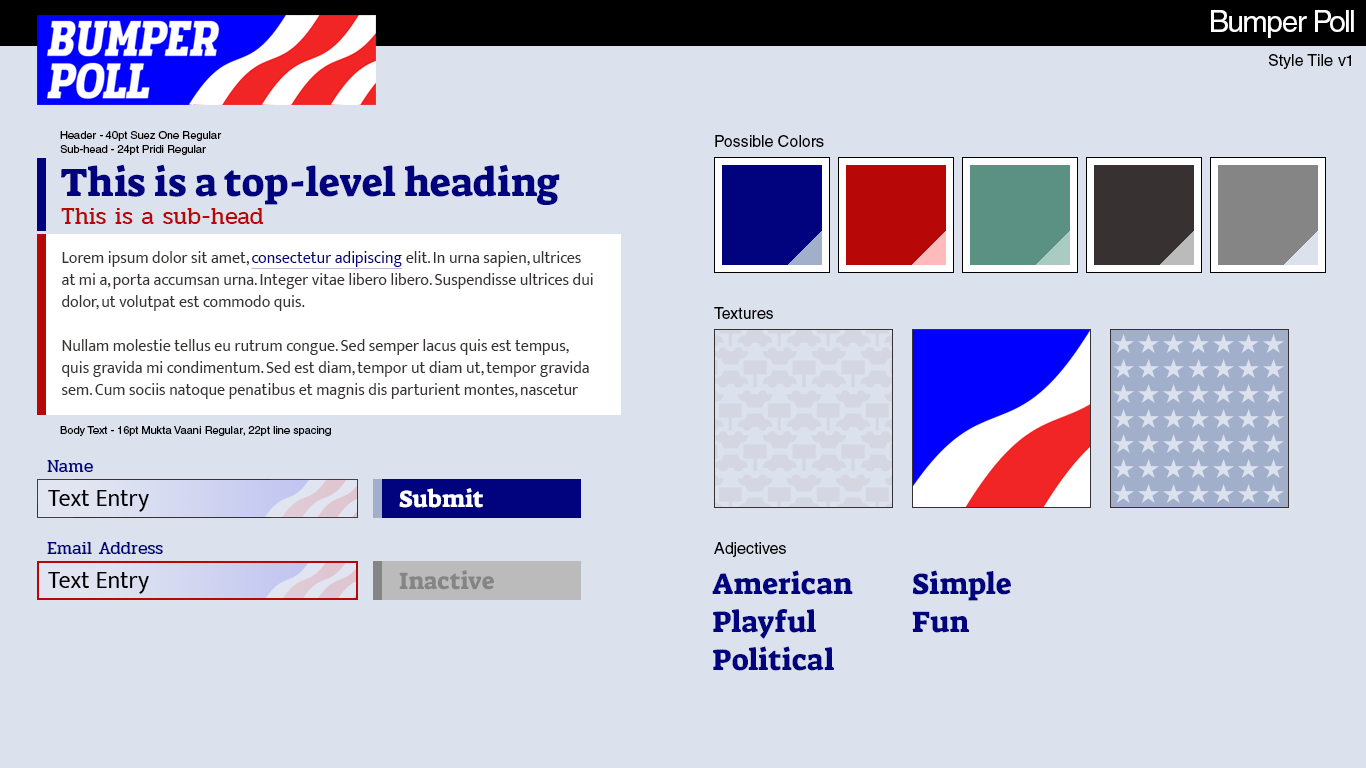
<style>
.page{position:relative;width:1366px;height:768px;background:#dce1ee}
.page>*{position:absolute;margin:0}
.t1{font:30px "HelveticaLT";letter-spacing:-0.05em;color:#ffffff}
.t2{font:16px "HelveticaLT";color:#000000}
.t3{font:11px "HelveticaLT";color:#000000}
.t4{font:40px "SuezOne-Regular";color:#00037d}
.t5{font:24px "Pridi-Regular";color:#b70707}
.t6{font:16px/22px "MuktaVaani-Regular";color:#383131}
.t7{font:16px/22px "MuktaVaani-Regular";color:#00037d;text-decoration:underline}
.t8{font:18px "Pridi-Regular";color:#00037d}
.t9{font:24px "MuktaVaani-Regular";color:#000000}
.t10{font:24px "SuezOne-Regular";color:#ffffff}
.t11{font:24px "SuezOne-Regular";color:#858585}
.t12{font:30px "SuezOne-Regular";color:#00037d}
</style>
<div class="page">
<p class="t1" style="left:1211px;top:10px;width:143px;height:28px">Bumper Poll</p>
<p class="t2" style="left:1269px;top:54px;width:82px;height:15px">Style Tile v1</p>
<p class="t3" style="left:60px;top:131px;width:162px;height:10px">Header - 40pt Suez One Regular</p>
<p class="t2" style="left:715px;top:135px;width:109px;height:12px">Possible Colors</p>
<p class="t3" style="left:60px;top:145px;width:146px;height:10px">Sub-head - 24pt Pridi Regular</p>
<p class="t4" style="left:61px;top:164px;width:499px;height:41px">This is a top-level heading</p>
<p class="t5" style="left:61px;top:208px;width:202px;height:16px">This is a sub-head</p>
<p class="t6" style="left:62px;top:251px;width:531px;height:148px">Lorem ipsum dolor sit amet, <span class="t7">consectetur adipiscing</span> elit. In urna sapien, ultrices at mi a, porta accumsan urna. Integer vitae libero libero. Suspendisse ultrices dui dolor, ut volutpat est commodo quis.<br><br>Nullam molestie tellus eu rutrum congue. Sed semper lacus quis est tempus, quis gravida mi condimentum. Sed est diam, tempor ut diam ut, tempor gravida sem. Cum sociis natoque penatibus et magnis dis parturient montes, nascetur ridiculus mus. Fusce finibus convallis arcu a placerat.</p>
<p class="t2" style="left:714px;top:307px;width:59px;height:12px">Textures</p>
<p class="t3" style="left:60px;top:426px;width:271px;height:10px">Body Text - 16pt Mukta Vaani Regular, 22pt line spacing</p>
<p class="t8" style="left:47px;top:460px;width:46px;height:12px">Name</p>
<p class="t9" style="left:48px;top:490px;width:101px;height:22px">Text Entry</p>
<p class="t10" style="left:399px;top:488px;width:84px;height:20px">Submit</p>
<p class="t8" style="left:47px;top:542px;width:116px;height:12px">Email Address</p>
<p class="t2" style="left:714px;top:542px;width:72px;height:15px">Adjectives</p>
<p class="t9" style="left:48px;top:572px;width:101px;height:22px">Text Entry</p>
<p class="t11" style="left:399px;top:570px;width:95px;height:20px">Inactive</p>
<p class="t12" style="left:712px;top:570px;width:141px;height:25px">American</p>
<p class="t12" style="left:912px;top:570px;width:99px;height:31px">Simple</p>
<p class="t12" style="left:713px;top:609px;width:103px;height:30px">Playful</p>
<p class="t12" style="left:912px;top:611px;width:57px;height:22px">Fun</p>
<p class="t12" style="left:713px;top:646px;width:121px;height:25px">Political</p>
</div>
